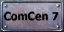
<style>
.page{position:relative;width:64px;height:32px}
.page>*{position:absolute;margin:0}
.t1{font:13px "Calibri-Bold";color:#000000}
</style>
<div class="page">
<p class="t1" style="left:3px;top:11px;width:55px;height:10px">ComCen 7</p>
</div>
